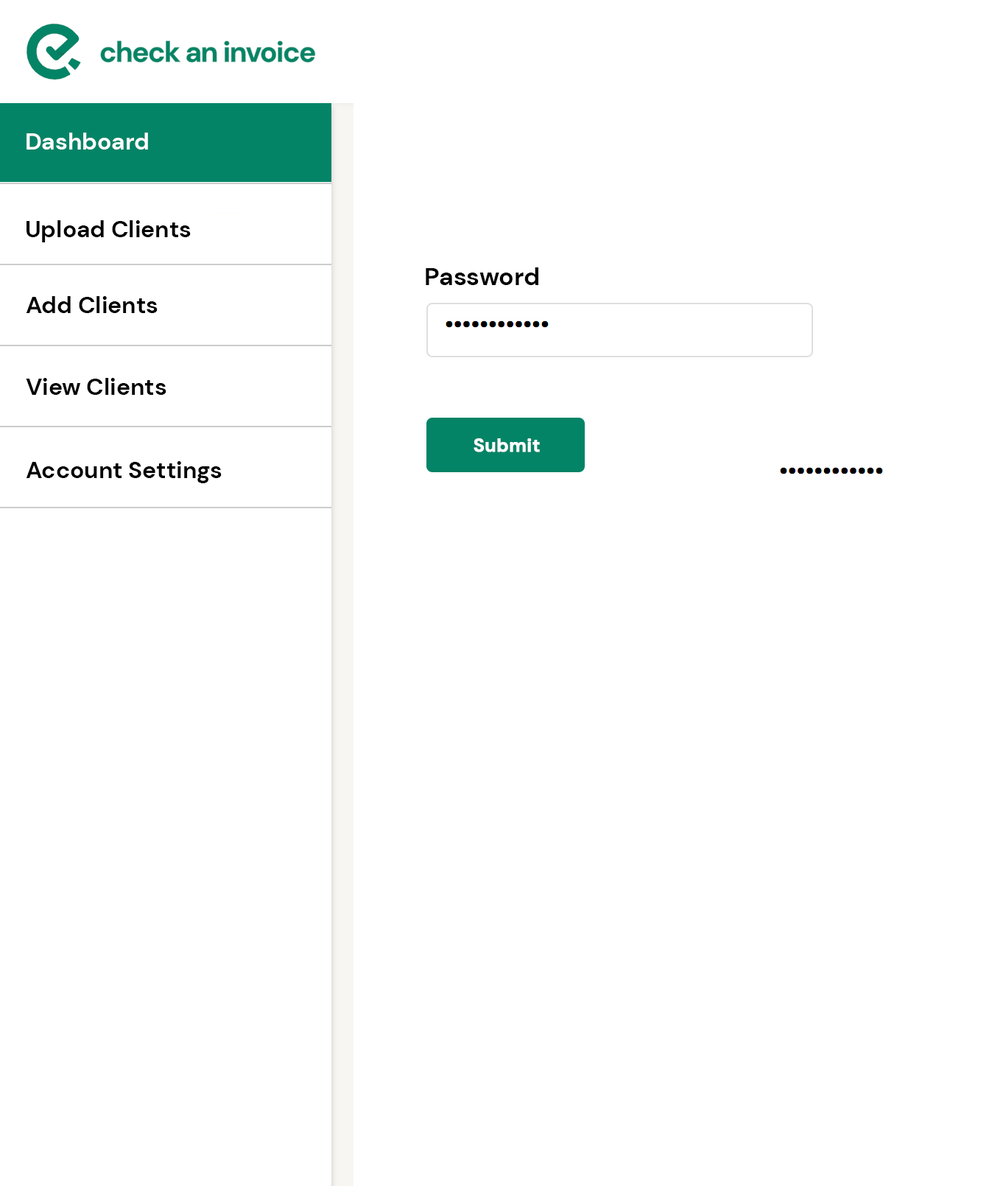
<style>
.page{position:relative;width:1006px;height:1186px;background:#ffffff}
.page>*{position:absolute;margin:0}
.t1{font:23.6px "DMSans-Bold";color:#ffffff}
.t2{font:23.6px "DMSans-Bold";color:#000000}
.t3{font:25px "DMSans-Bold";color:#000000}
.t4{font:18.4px "DMSans-Bold";color:#ffffff;font-weight:bold}
</style>
<div class="page">
<p class="t1" style="left:27px;top:133px;width:121px;height:16px">Dashboard</p>
<p class="t2" style="left:27px;top:220px;width:164px;height:22px">Upload Clients</p>
<p class="t3" style="left:426px;top:267px;width:112px;height:18px">Password</p>
<p class="t2" style="left:26px;top:296px;width:132px;height:17px">Add Clients</p>
<p class="t2" style="left:26px;top:378px;width:140px;height:17px">View Clients</p>
<p class="t4" style="left:473px;top:438px;width:67px;height:14px">Submit</p>
<p class="t2" style="left:26px;top:461px;width:196px;height:22px">Account Settings</p>
</div>
